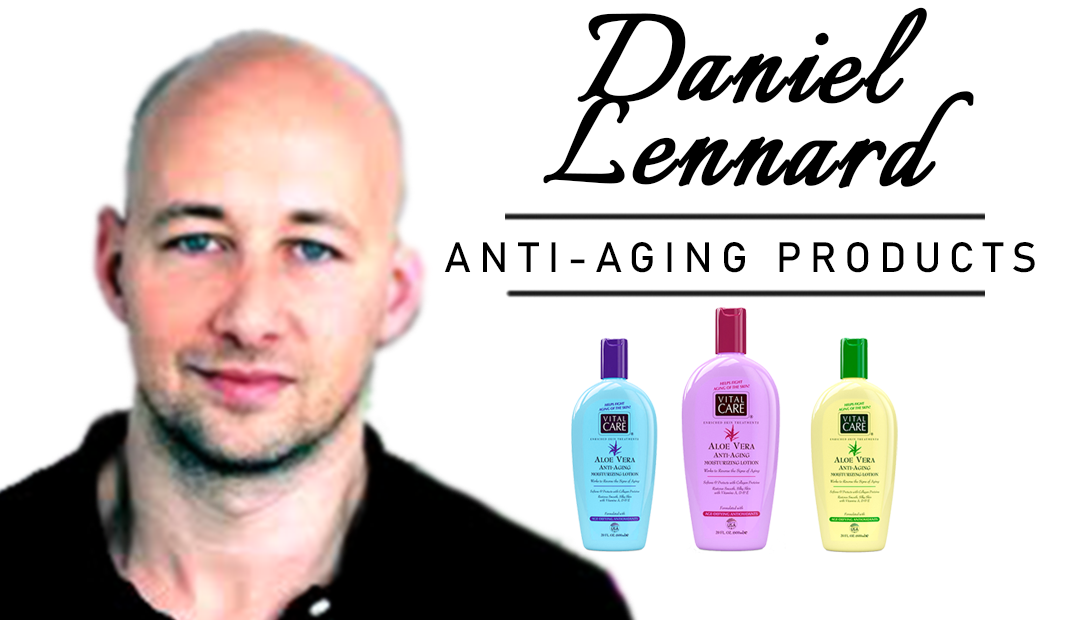
<style>
.page{position:relative;width:1080px;height:620px;background:#ffffff}
.page>*{position:absolute;margin:0}
.t1{font:150px/83.3px "Italianno-Regular";letter-spacing:0.01em;color:#000000;font-weight:bold}
.t2{font:150px/83.3px "Italianno-Regular";color:#000000;font-weight:bold}
.t3{font:41.7px "Bahnschrift";letter-spacing:0.2em;color:#000000;font-weight:bold}
</style>
<div class="page">
<p class="t1" style="left:543px;top:7px;width:431px;height:182px;text-align:center;rotate:1deg">Daniel <br>Lennar<span class="t2">d</span></p>
<p class="t3" style="left:444px;top:242px;width:591px;height:31px">ANTI-AGING PRODUCTS</p>
</div>
